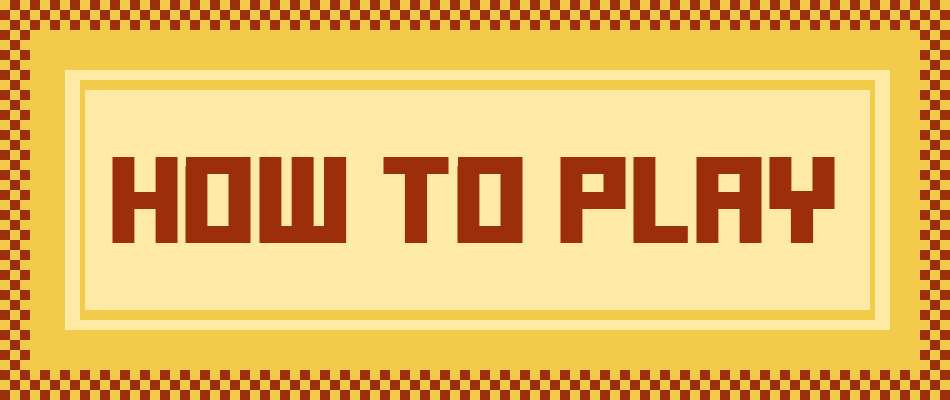
<style>
.page{position:relative;width:950px;height:400px;background:#ffeaa5}
.page>*{position:absolute;margin:0}
.t1{font:68.9px "FFFForward";letter-spacing:-0.025em;color:#9c2e0b;scale:1.25 1}
</style>
<div class="page">
<p class="t1" style="left:112px;top:157px;width:723px;height:86px">HOW TO PLAY</p>
</div>
